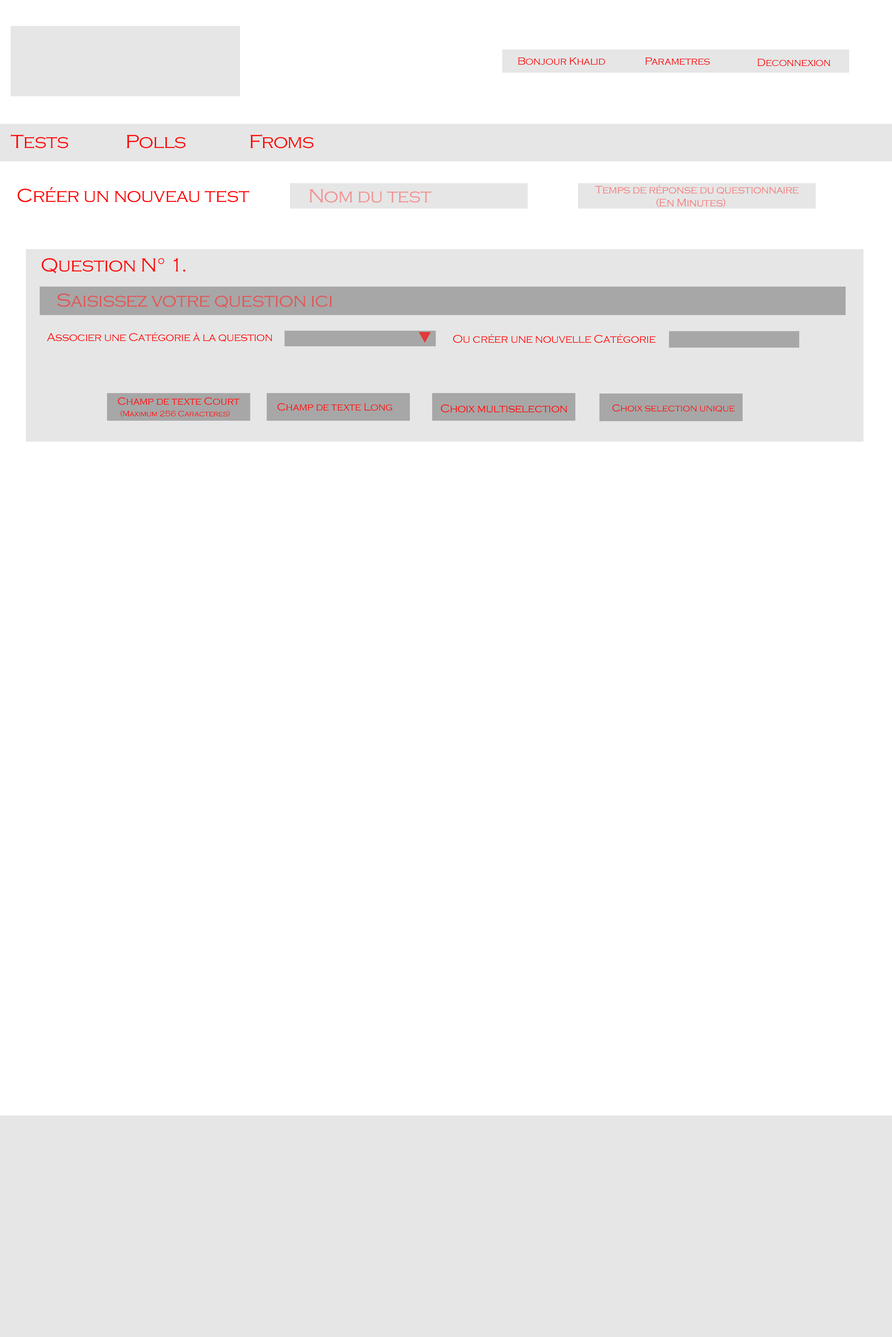
<style>
.page{position:relative;width:892px;height:1337px;background:#ffffff}
.page>*{position:absolute;margin:0}
.t1{font:10.7px "CopperplateGothic-Light";letter-spacing:-0.025em;color:#f30000}
.t2{font:19.6px "CopperplateGothic-Light";letter-spacing:-0.025em;color:#ff0000}
.t3{font:11.1px "CopperplateGothic-Light";letter-spacing:-0.025em;color:#f67878}
.t4{font:19.6px "CopperplateGothic-Light";letter-spacing:-0.025em;color:#f39191}
.t5{font:19.6px "CopperplateGothic-Light";letter-spacing:-0.025em;color:#e05757}
.t6{font:11.6px "CopperplateGothic-Light";letter-spacing:-0.025em;color:#ff0000}
.t7{font:10.7px "CopperplateGothic-Light";letter-spacing:-0.025em;color:#ff0000}
.t8{font:8px "CopperplateGothic-Light";letter-spacing:-0.025em;color:#ff0000}
.t9{font:10.3px "CopperplateGothic-Light";letter-spacing:-0.025em;color:#ff0000}
</style>
<div class="page">
<p class="t1" style="left:518px;top:58px;width:87px;height:7px">Bonjour Khalid</p>
<p class="t1" style="left:645px;top:58px;width:65px;height:7px">Parametres</p>
<p class="t1" style="left:757px;top:59px;width:73px;height:7px">Deconnexion</p>
<p class="t2" style="left:11px;top:134px;width:57px;height:15px">Tests</p>
<p class="t2" style="left:127px;top:135px;width:58px;height:14px">Polls</p>
<p class="t2" style="left:250px;top:134px;width:63px;height:14px">Froms</p>
<p class="t3" style="left:595px;top:185px;width:203px;height:10px">Temps de réponse du questionnaire</p>
<p class="t2" style="left:17px;top:187px;width:232px;height:16px">Créer un nouveau test</p>
<p class="t4" style="left:309px;top:189px;width:122px;height:14px">Nom du test</p>
<p class="t3" style="left:656px;top:198px;width:69px;height:9px">(En Minutes)</p>
<p class="t2" style="left:41px;top:258px;width:144px;height:16px">Question N° 1.</p>
<p class="t5" style="left:57px;top:293px;width:275px;height:16px">Saisissez votre question ici</p>
<p class="t6" style="left:47px;top:332px;width:225px;height:10px">Associer une Catégorie à la question</p>
<p class="t6" style="left:453px;top:334px;width:202px;height:9px">Ou créer une nouvelle Catégorie</p>
<p class="t7" style="left:118px;top:397px;width:121px;height:8px">Champ de texte Court</p>
<p class="t8" style="left:120px;top:410px;width:110px;height:7px">(Maximum 256 Caracteres)</p>
<p class="t7" style="left:277px;top:403px;width:115px;height:8px">Champ de texte Long</p>
<p class="t6" style="left:440px;top:404px;width:127px;height:9px">Choix multiselection</p>
<p class="t9" style="left:612px;top:404px;width:122px;height:9px">Choix selection unique</p>
</div>
